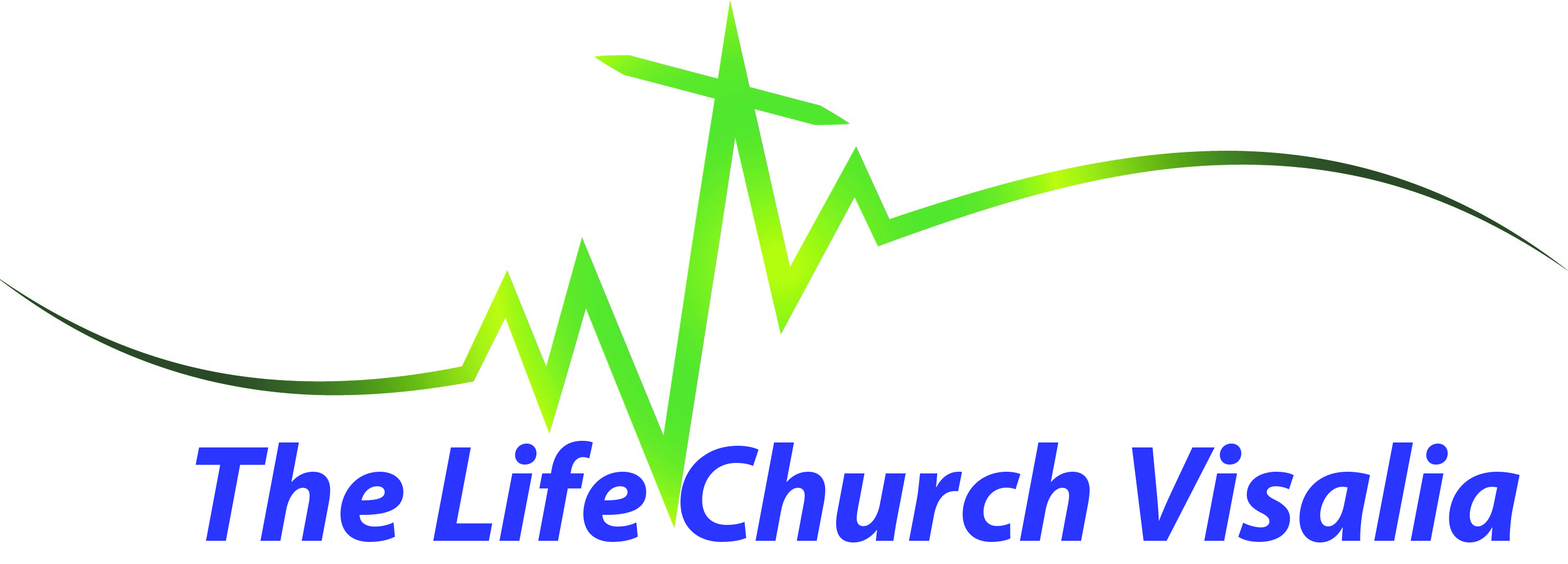
<style>
.page{position:relative;width:1568px;height:564px;background:#ffffff}
.page>*{position:absolute;margin:0}
.t1{font:138px "MyriadPro-BoldIt";color:#2a35ff}
</style>
<div class="page">
<p class="t1" style="left:195px;top:440px;width:1325px;height:102px">The Life Church Visalia</p>
</div>
